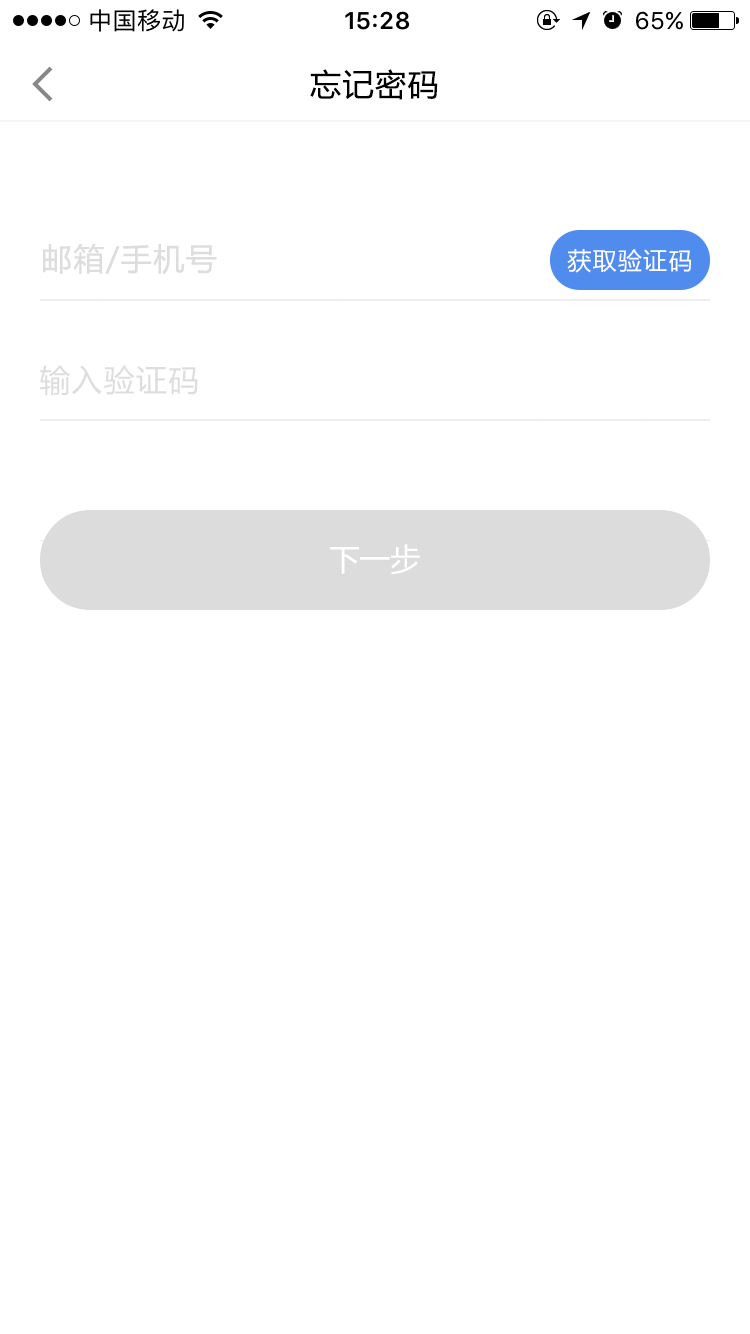
<style>
.page{position:relative;width:750px;height:1334px;background:#ffffff}
.page>*{position:absolute;margin:0}
.t1{font:31px "MicrosoftYaHei";letter-spacing:0.05em;color:#000000}
.t2{font:31px "MicrosoftYaHei";letter-spacing:0.05em;color:#dddddd}
.t3{font:24px "MicrosoftYaHei";letter-spacing:0.05em;color:#ffffff}
.t4{font:30.7px "MicrosoftYaHei";letter-spacing:0.05em;color:#dddddd}
.t5{font:30.7px "MicrosoftYaHei";color:#ffffff}
</style>
<div class="page">
<p class="t1" style="left:310px;top:69px;width:128px;height:31px">忘记密码</p>
<p class="t2" style="left:43px;top:244px;width:174px;height:31px">邮箱/手机号</p>
<p class="t3" style="left:567px;top:249px;width:124px;height:24px">获取验证码</p>
<p class="t4" style="left:40px;top:365px;width:158px;height:31px">输入验证码</p>
<p class="t5" style="left:330px;top:544px;width:90px;height:31px">下一步</p>
</div>
